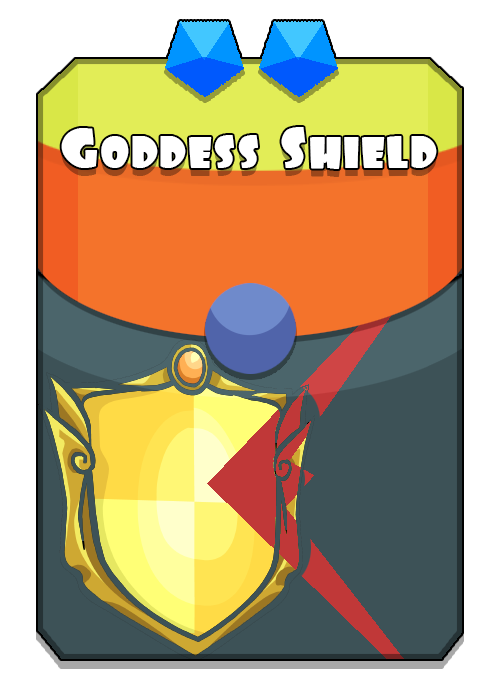
<style>
.page{position:relative;width:500px;height:698px;background:#ffffff}
.page>*{position:absolute;margin:0}
.t1{font:50px "Foo";color:#ffffff}
</style>
<div class="page">
<p class="t1" style="left:61px;top:127px;width:376px;height:42px">Goddess Shield</p>
</div>
